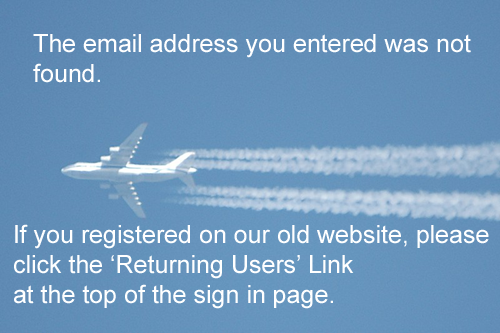
<style>
.page{position:relative;width:500px;height:333px}
.page>*{position:absolute;margin:0}
.t1{font:25px "ArialMT";color:#ffffff}
</style>
<div class="page">
<p class="t1" style="left:33px;top:34px;width:438px;height:49px">The email address you entered was not<br>found.</p>
<p class="t1" style="left:14px;top:224px;width:475px;height:85px">If you registered on our old website, please<br>click the ‘Returning Users’ Link<br>at the top of the sign in page.</p>
</div>
